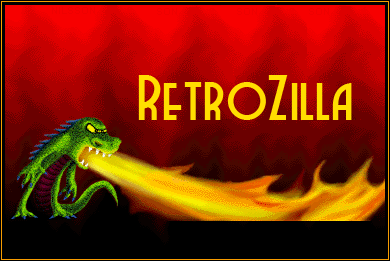
<style>
.page{position:relative;width:390px;height:261px;background:#000000}
.page>*{position:absolute;margin:0}
.t1{font:60px "DubbaDubbaNF";color:#ffde00}
</style>
<div class="page">
<p class="t1" style="left:138px;top:75px;width:214px;height:45px">RetroZilla</p>
</div>
